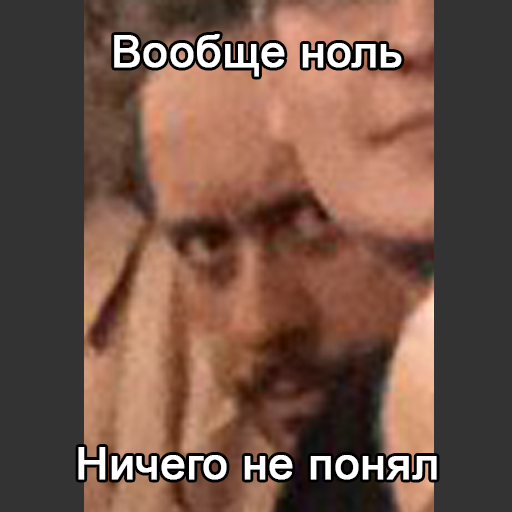
<style>
.page{position:relative;width:512px;height:512px;background:#333333}
.page>*{position:absolute;margin:0}
.t1{font:45px "ArialMT";color:#ffffff;font-weight:bold}
</style>
<div class="page">
<p class="t1" style="left:114px;top:34px;width:288px;height:43px">Вообще ноль</p>
<p class="t1" style="left:78px;top:447px;width:359px;height:33px">Ничего не понял</p>
</div>
